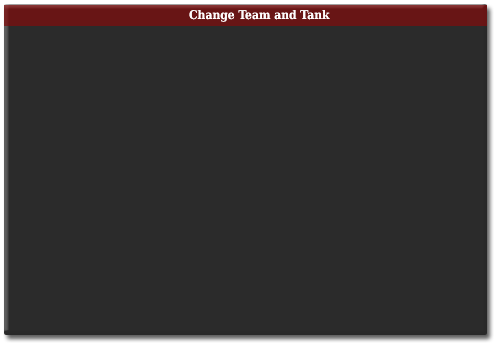
<style>
.page{position:relative;width:497px;height:345px;background:#2b2b2b}
.page>*{position:absolute;margin:0}
.t1{font:12px "DejaVuSerifCondensed-Bold";color:#fdfdfd}
</style>
<div class="page">
<p class="t1" style="left:189px;top:10px;width:141px;height:12px">Change Team and Tank</p>
</div>
